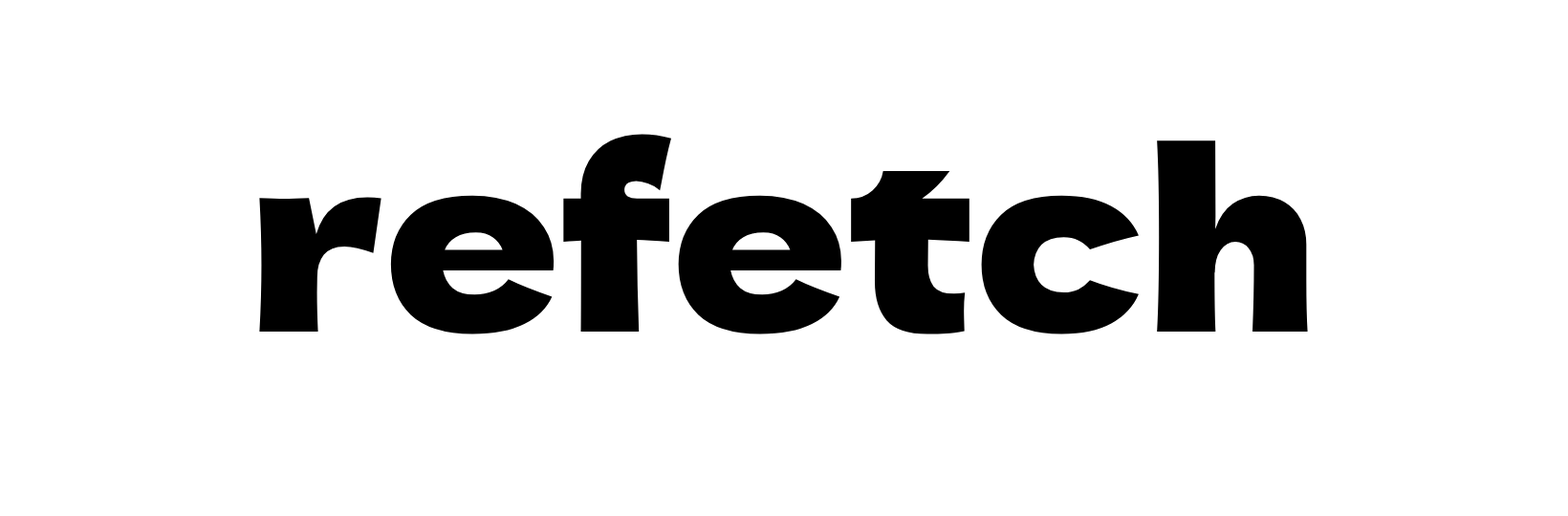
<style>
.page{position:relative;width:1568px;height:516px;background:#ffffff}
.page>*{position:absolute;margin:0}
.t1{font:244.8px "DelaGothicOne-Regular";color:#000000}
</style>
<div class="page">
<p class="t1" style="left:259px;top:134px;width:1049px;height:201px">refetch</p>
</div>
